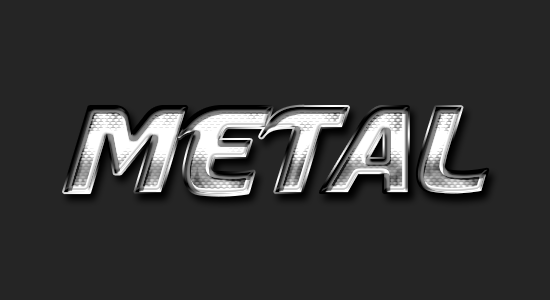
<style>
.page{position:relative;width:550px;height:300px;background:#252525}
.page>*{position:absolute;margin:0}
.t1{font:113.6px "Masque"}
</style>
<div class="page">
<p class="t1" style="left:64px;top:106px;width:424px;height:89px">metal</p>
</div>
